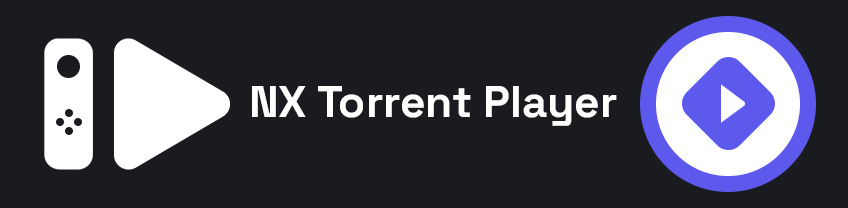
<style>
.page{position:relative;width:848px;height:208px;background:#191b1e}
.page>*{position:absolute;margin:0}
.t1{font:44.3px "SpaceGrotesk-Bold";color:#ffffff}
</style>
<div class="page">
<p class="t1" style="left:252px;top:86px;width:365px;height:40px">NX Torrent Player</p>
</div>
